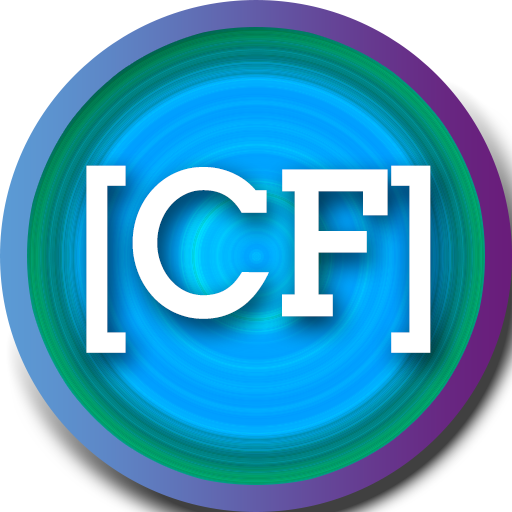
<style>
.page{position:relative;width:512px;height:512px;background:#ffffff}
.page>*{position:absolute;margin:0}
.t1{font:197.8px "TwentytwelveSlab-Bold";letter-spacing:-0.025em;color:#ffffff}
</style>
<div class="page">
<p class="t1" style="left:86px;top:165px;width:345px;height:188px">[CF]</p>
</div>
